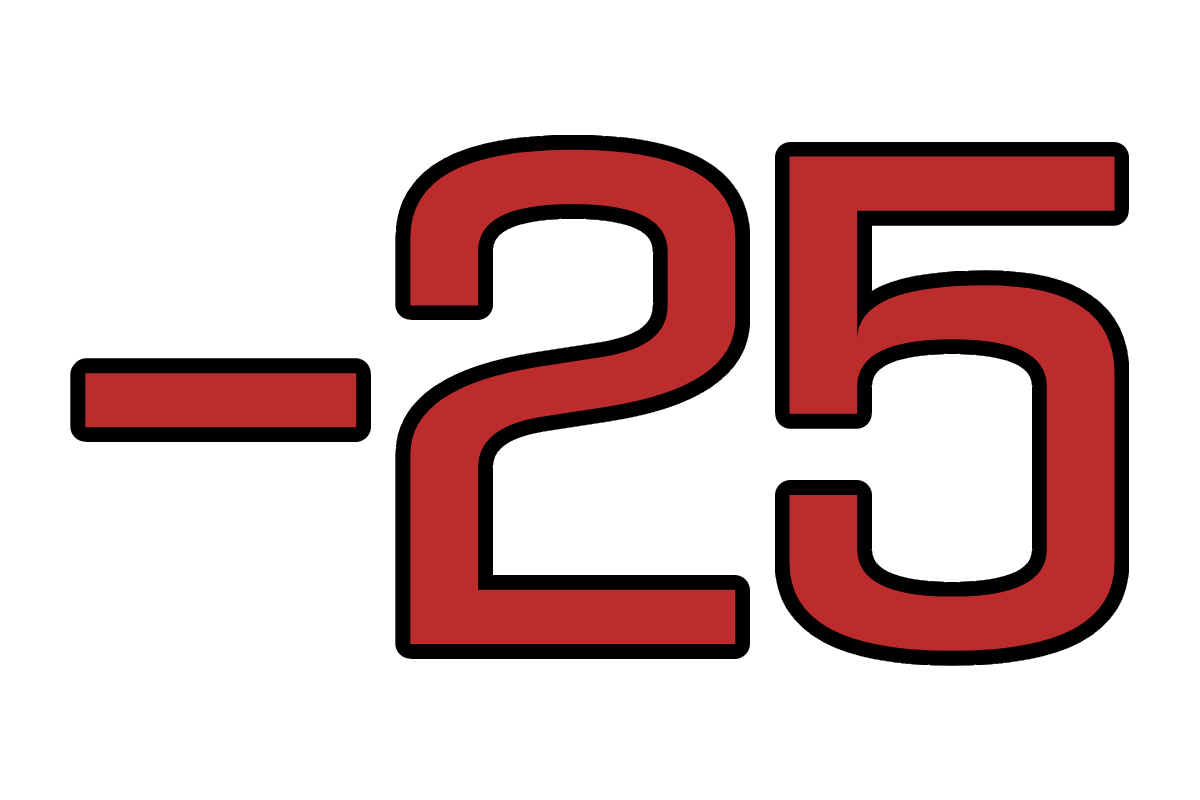
<style>
.page{position:relative;width:1200px;height:800px;background:#ffffff}
.page>*{position:absolute;margin:0}
.t1{font:650px "Enigmatic";color:#bd2c2c}
</style>
<div class="page">
<p class="t1" style="left:85px;top:149px;width:1030px;height:502px">-25</p>
</div>
